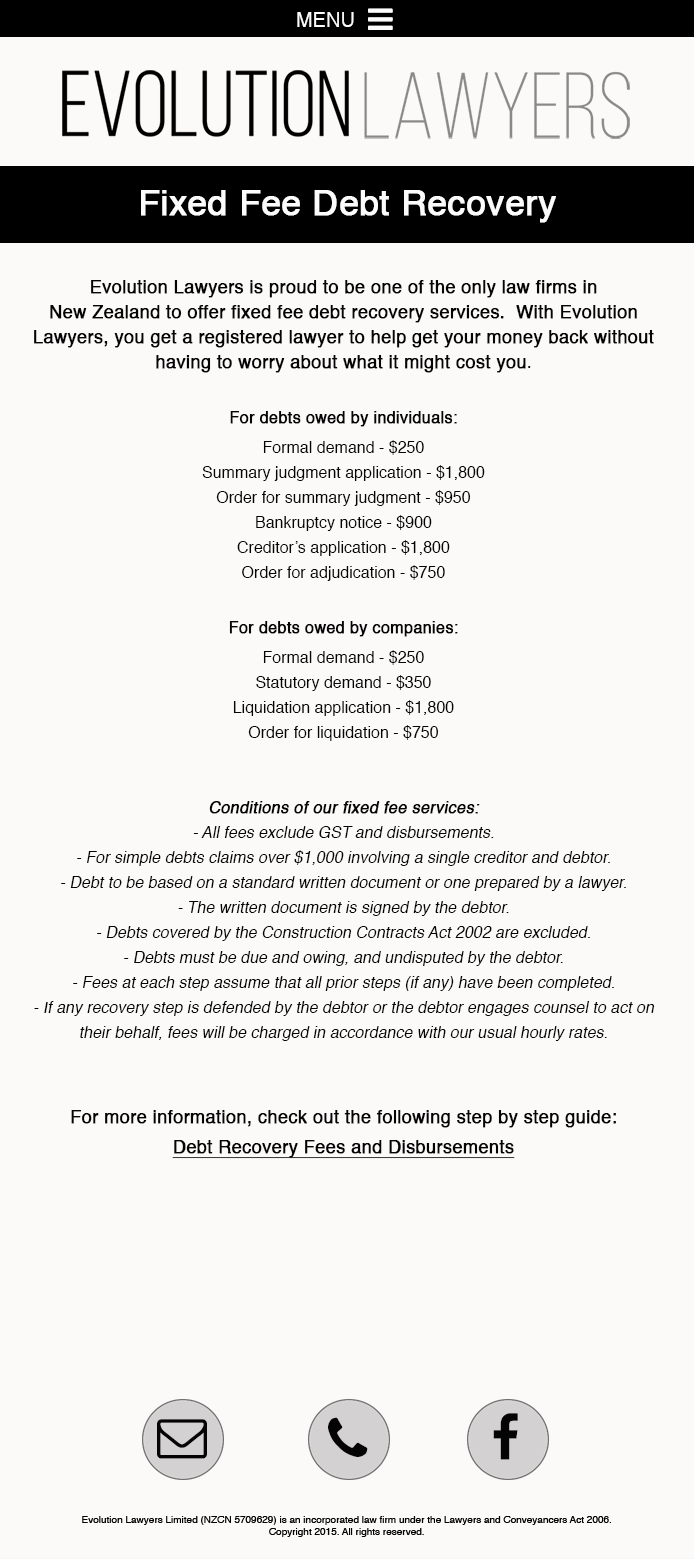
<style>
.page{position:relative;width:694px;height:1559px;background:#fcf9f9}
.page>*{position:absolute;margin:0}
.t1{font:20px "Helvetica";color:#fdfcfc}
.t2{font:35px "Helvetica";color:#fdfcfc;font-weight:bold}
.t3{font:16px/25px "Helvetica";color:#040404;font-style:italic}
.t4{font:18px/25px "Helvetica";color:#040404;font-weight:bold}
.t5{font:18px/25px "Helvetica";color:#040404}
.t6{font:16px/30px "Helvetica";color:#040404;font-weight:bold}
.t7{font:16px/30px "Helvetica";color:#040404}
.t8{font:16px/25px "Helvetica";color:#040404}
.t9{font:16px/25px "Helvetica";color:#040404;font-weight:bold;font-style:italic}
.t10{font:18px/30px "Helvetica";color:#040404;font-weight:bold}
.t11{font:18px/30px "Helvetica";color:#040404;font-weight:bold;text-decoration:underline}
</style>
<div class="page">
<p class="t1" style="left:297px;top:12px;width:57px;height:15px">MENU</p>
<p class="t2" style="left:141px;top:190px;width:415px;height:33px">Fixed Fee Debt Recovery</p>
<p class="t3" style="left:34px;top:280px;width:621px;height:879px;text-align:center"><span class="t4">Evolution Lawyers is proud to be one of the only law firms in <br>New Zealand to offer fixed fee debt recovery services.  With Evolution Lawyers, you get a registered lawyer to help get your money back without having to worry about what it might cost you</span><span class="t5">.<br><br></span><span class="t6">For debts owed by individuals:<br></span><span class="t7">Formal demand - $250<br></span><span class="t8">Summary judgment application - $1,800<br>Order for summary judgment - $950<br>Bankruptcy notice - $900<br>Creditor’s application - $1,800<br>Order for adjudication - $750<br><br></span><span class="t6">For debts owed by companies:</span><span class="t7"><br>Formal demand - $250<br></span><span class="t8">Statutory demand - $350<br>Liquidation application - $1,800<br>Order for liquidation - $750<br><br></span><span class="t9"><br>Conditions of our fixed fee services:<br></span>- All fees exclude GST and disbursements.<br>- For simple debts claims over $1,000 involving a single creditor and debtor.<br>- Debt to be based on a standard written document or one prepared by a lawyer.<br>- The written document is signed by the debtor.<br>- Debts covered by the Construction Contracts Act 2002 are excluded.<br>- Debts must be due and owing, and undisputed by the debtor.<br>- Fees at each step assume that all prior steps (if any) have been completed.<br>- If any recovery step is defended by the debtor or the debtor engages counsel to act on their behalf, fees will be charged in accordance with our usual hourly rates. <br><br><br><span class="t10">For more information, check out the following step by step guide:<br></span><span class="t11">Debt Recovery Fees and Disbursements</span></p>
</div>
